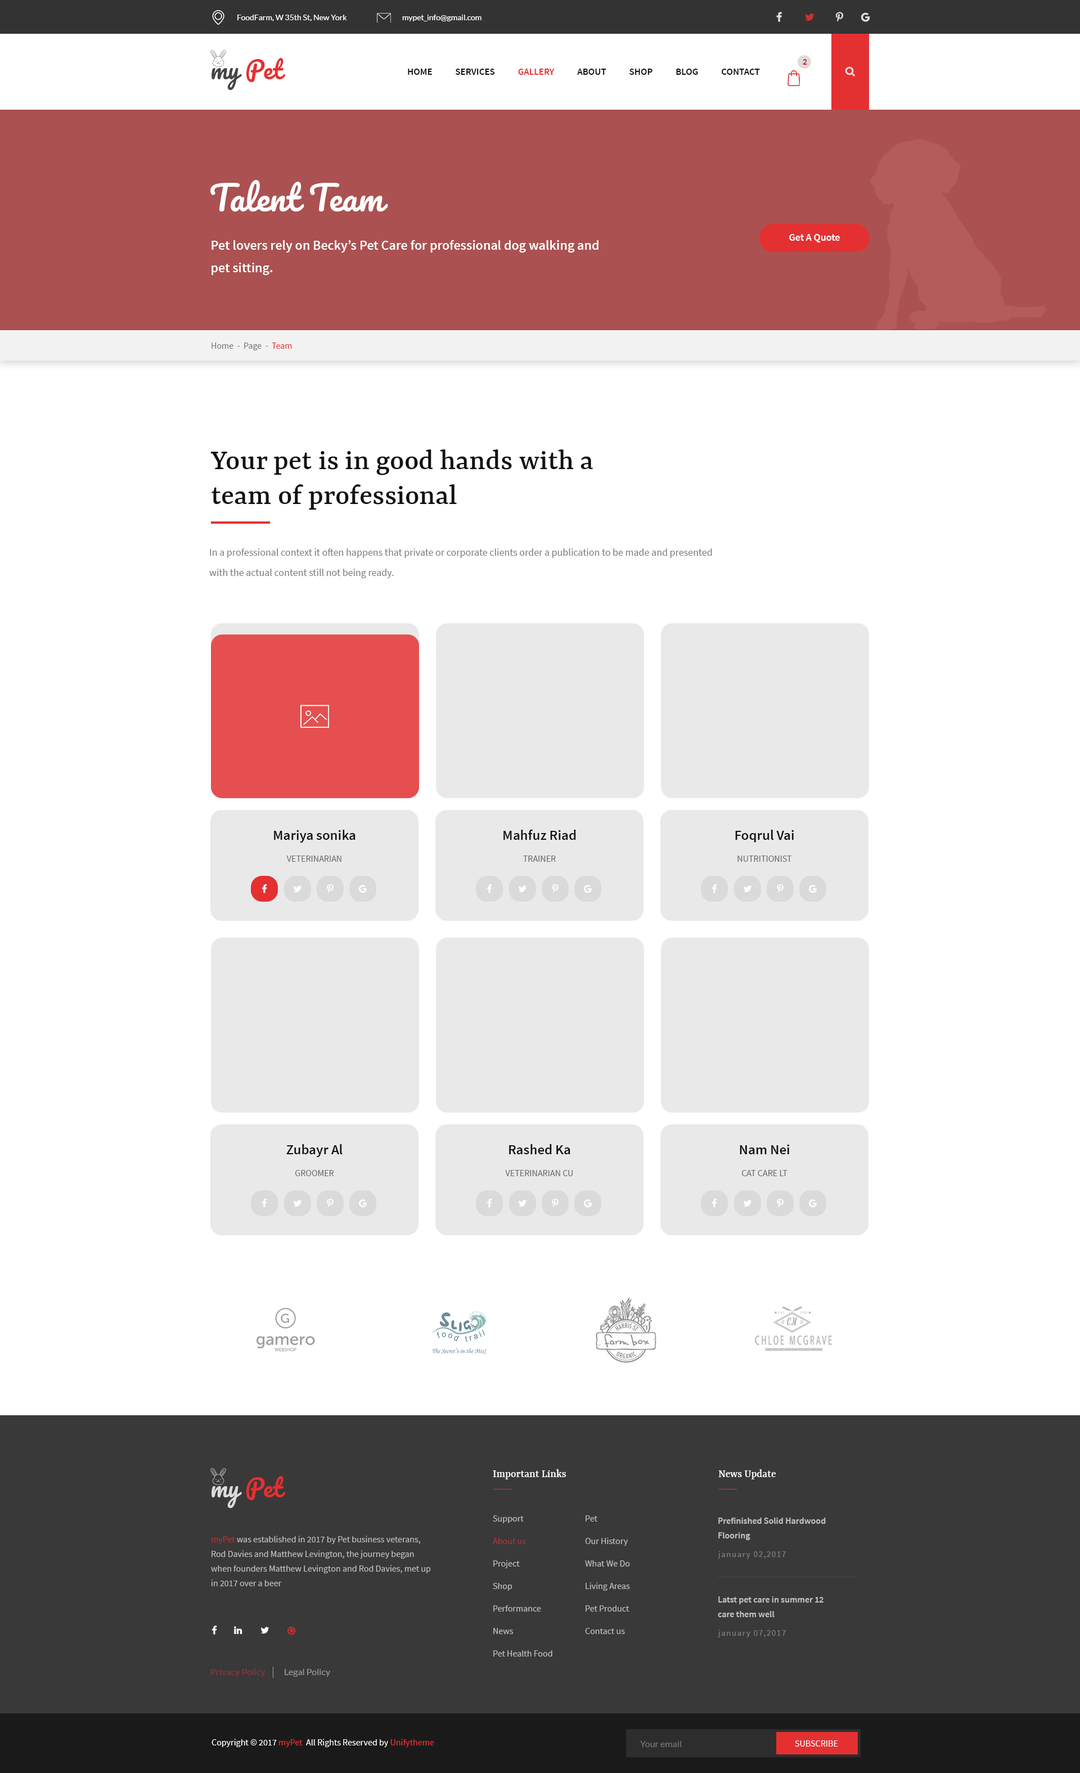
<style>
.page{position:relative;width:1080px;height:1773px;background:#ffffff}
.page>*{position:absolute;margin:0}
.t1{font:7.9px "Lato-Regular";color:#ffffff}
.t2{font:23.6px "Pacifico-Regular";color:#e53031}
.t3{font:23.6px "Pacifico-Regular";color:#454444}
.t4{font:9px "SourceSansPro-SemiBold";color:#d12526;text-transform:uppercase}
.t5{font:9.6px "SourceSansPro-SemiBold";color:#121212;text-transform:uppercase}
.t6{font:9.6px "SourceSansPro-SemiBold";color:#e53031;text-transform:uppercase}
.t7{font:33.8px "Pacifico-Regular";color:#ffffff}
.t8{font:13.5px/22.5px "SourceSansPro-SemiBold";color:#ffffff}
.t9{font:10.1px "SourceSansPro-SemiBold";color:#fffefe}
.t10{font:9px "SourceSansPro-Regular";color:#767575}
.t11{font:9px "SourceSansPro-Regular";color:#e53031}
.t12{font:30.4px/34.9px "Yrsa-Medium";color:#121212}
.t13{font:10.1px/20.2px "SourceSansPro-Regular";color:#797979}
.t14{font:14.1px "SourceSansPro-SemiBold";color:#121212}
.t15{font:9px "SourceSansPro-Regular";color:#696969}
.t16{font:9px "SourceSansPro-Regular";color:#696969;text-transform:uppercase}
.t17{font:11.2px "Yrsa-Medium";color:#ffffff}
.t18{font:23.6px "Pacifico-Regular";color:#dcdada}
.t19{font:9px/22.5px "SourceSansPro-Regular";color:#c0c0c0}
.t20{font:9px/14.6px "SourceSansPro-SemiBold";color:#c0c0c0}
.t21{font:9px/14.6px "SourceSansPro-Regular";color:#c0c0c0}
.t22{font:8.4px "SourceSansPro-Regular";letter-spacing:0.1em;color:#7d7d7d}
.t23{font:9px "Lato-Regular";color:#8e3536}
.t24{font:9px "Lato-Regular";color:#9c9b9b}
.t25{font:9px "SourceSansPro-Regular";color:#fefefe}
.t26{font:9px "Lato-Regular";color:#777777}
.t27{font:9px "SourceSansPro-Regular";color:#ffffff;text-transform:uppercase}
</style>
<div class="page">
<p class="t1" style="left:237px;top:15px;width:110px;height:6px">FoodFarm, W 35th St, New York</p>
<p class="t1" style="left:402px;top:15px;width:80px;height:6px">mypet_info@gmail.com</p>
<p class="t2" style="left:212px;top:58px;width:73px;height:32px"><span class="t3">my </span>Pet</p>
<p class="t4" style="left:803px;top:59px;width:4px;height:6px">2</p>
<p class="t5" style="left:408px;top:69px;width:352px;height:6px">Home            Services            <span class="t6">Gallery            </span>About            Shop            Blog            Contact</p>
<p class="t7" style="left:210px;top:180px;width:178px;height:32px">Talent Team</p>
<p class="t8" style="left:212px;top:240px;width:386px;height:35px">Pet lovers rely on Becky’s Pet Care for professional dog walking and pet sitting.</p>
<p class="t9" style="left:789px;top:234px;width:51px;height:8px">Get A Quote</p>
<p class="t10" style="left:212px;top:343px;width:80px;height:7px">Home  -  Page  - <span class="t11"> Team</span></p>
<p class="t12" style="left:210px;top:449px;width:383px;height:61px">Your pet is in good hands with a team of professional</p>
<p class="t13" style="left:209px;top:548px;width:503px;height:30px">In a professional context it often happens that private or corporate clients order a publication to be made and presented with the actual content still not being ready.</p>
<p class="t14" style="left:274px;top:830px;width:82px;height:13px">Mariya sonika</p>
<p class="t14" style="left:503px;top:830px;width:73px;height:10px">Mahfuz Riad</p>
<p class="t14" style="left:735px;top:830px;width:59px;height:13px">Foqrul Vai</p>
<p class="t15" style="left:286px;top:856px;width:55px;height:6px">VETERINARIAN</p>
<p class="t15" style="left:523px;top:856px;width:33px;height:6px">TRAINER</p>
<p class="t15" style="left:737px;top:856px;width:55px;height:6px">NUTRITIONIST</p>
<p class="t14" style="left:286px;top:1144px;width:57px;height:13px">Zubayr Al</p>
<p class="t14" style="left:509px;top:1144px;width:61px;height:10px">Rashed Ka</p>
<p class="t14" style="left:740px;top:1144px;width:49px;height:10px">Nam Nei</p>
<p class="t15" style="left:295px;top:1170px;width:39px;height:6px">GROOMER</p>
<p class="t15" style="left:505px;top:1170px;width:68px;height:6px">VETERINARIAN CU</p>
<p class="t16" style="left:742px;top:1170px;width:46px;height:6px">Cat Care LT</p>
<p class="t17" style="left:493px;top:1469px;width:73px;height:10px">Important Links</p>
<p class="t17" style="left:718px;top:1469px;width:58px;height:10px">News Update</p>
<p class="t2" style="left:212px;top:1476px;width:73px;height:32px"><span class="t18">my </span>Pet</p>
<p class="t19" style="left:493px;top:1515px;width:59px;height:142px">Support<br>About us <br>Project<br>Shop<br>Performance<br>News<br>Pet Health Food</p>
<p class="t19" style="left:585px;top:1515px;width:45px;height:119px">Pet<br>Our History<br>What We Do<br>Living Areas<br>Pet Product<br>Contact us</p>
<p class="t20" style="left:718px;top:1518px;width:108px;height:22px">Prefinished Solid Hardwood <br>Flooring</p>
<p class="t21" style="left:211px;top:1536px;width:220px;height:50px">myPet was established in 2017 by Pet business veterans, Rod Davies and Matthew Levington, the journey began when founders Matthew Levington and Rod Davies, met up in 2017 over a beer</p>
<p class="t22" style="left:718px;top:1551px;width:68px;height:8px">january 02,2017</p>
<p class="t20" style="left:718px;top:1596px;width:106px;height:21px">Latst pet care in summer 12<br>care them well</p>
<p class="t22" style="left:718px;top:1630px;width:68px;height:7px">january 07,2017</p>
<p class="t23" style="left:211px;top:1669px;width:55px;height:8px">Privacy Policy</p>
<p class="t24" style="left:285px;top:1669px;width:45px;height:8px">Legal Policy</p>
<p class="t25" style="left:212px;top:1739px;width:222px;height:8px">Copyright © 2017 <span class="t11">myPet </span> All Rights Reserved by <span class="t11">Unifytheme</span></p>
<p class="t26" style="left:640px;top:1741px;width:41px;height:6px">Your email</p>
<p class="t27" style="left:795px;top:1740px;width:43px;height:7px">Subscribe</p>
</div>
